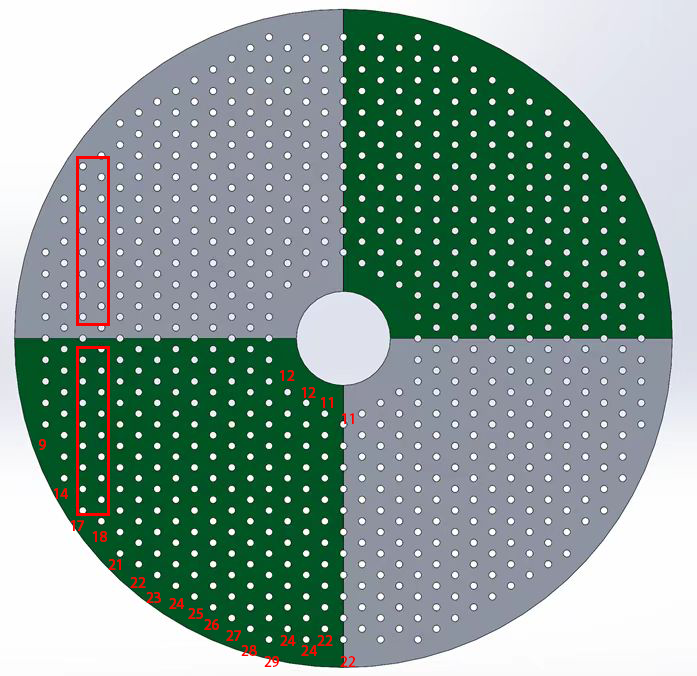
<style>
.page{position:relative;width:697px;height:676px}
.page>*{position:absolute;margin:0}
.t1{font:14px "AdobeHeitiStd-Regular";color:#ff0000}
</style>
<div class="page">
<p class="t1" style="left:280px;top:370px;width:15px;height:11px">12</p>
<p class="t1" style="left:301px;top:387px;width:15px;height:11px">12</p>
<p class="t1" style="left:321px;top:397px;width:12px;height:11px">11</p>
<p class="t1" style="left:342px;top:413px;width:12px;height:11px">11</p>
<p class="t1" style="left:39px;top:439px;width:7px;height:11px">9</p>
<p class="t1" style="left:54px;top:488px;width:14px;height:11px">14</p>
<p class="t1" style="left:70px;top:520px;width:14px;height:11px">17</p>
<p class="t1" style="left:92px;top:531px;width:15px;height:11px">18</p>
<p class="t1" style="left:108px;top:559px;width:13px;height:11px">21</p>
<p class="t1" style="left:130px;top:577px;width:16px;height:11px">22</p>
<p class="t1" style="left:146px;top:592px;width:15px;height:11px">23</p>
<p class="t1" style="left:169px;top:598px;width:15px;height:11px">24</p>
<p class="t1" style="left:188px;top:608px;width:15px;height:11px">25</p>
<p class="t1" style="left:204px;top:619px;width:15px;height:11px">26</p>
<p class="t1" style="left:226px;top:630px;width:15px;height:11px">27</p>
<p class="t1" style="left:280px;top:635px;width:16px;height:11px">24</p>
<p class="t1" style="left:317px;top:635px;width:16px;height:11px">22</p>
<p class="t1" style="left:241px;top:645px;width:16px;height:11px">28</p>
<p class="t1" style="left:301px;top:645px;width:16px;height:11px">24</p>
<p class="t1" style="left:264px;top:656px;width:15px;height:11px">29</p>
<p class="t1" style="left:340px;top:656px;width:16px;height:11px">22</p>
</div>
